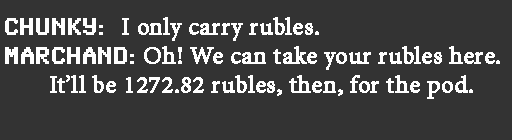
<style>
.page{position:relative;width:512px;height:140px;background:#333333}
.page>*{position:absolute;margin:0}
.t1{font:24px "MinionPro-Regular";color:#ffffff;font-weight:bold}
.t2{font:24px "SynchroLET";color:#ffffff;font-weight:bold}
</style>
<div class="page">
<p class="t1" style="left:5px;top:17px;width:495px;height:82px"><span class="t2">Chunky:  </span>I only carry rubles.<br><span class="t2">MARCHAND:</span> Oh! We can take your rubles here. <br>       It’ll be 1272.82 rubles, then, for the pod.</p>
</div>
